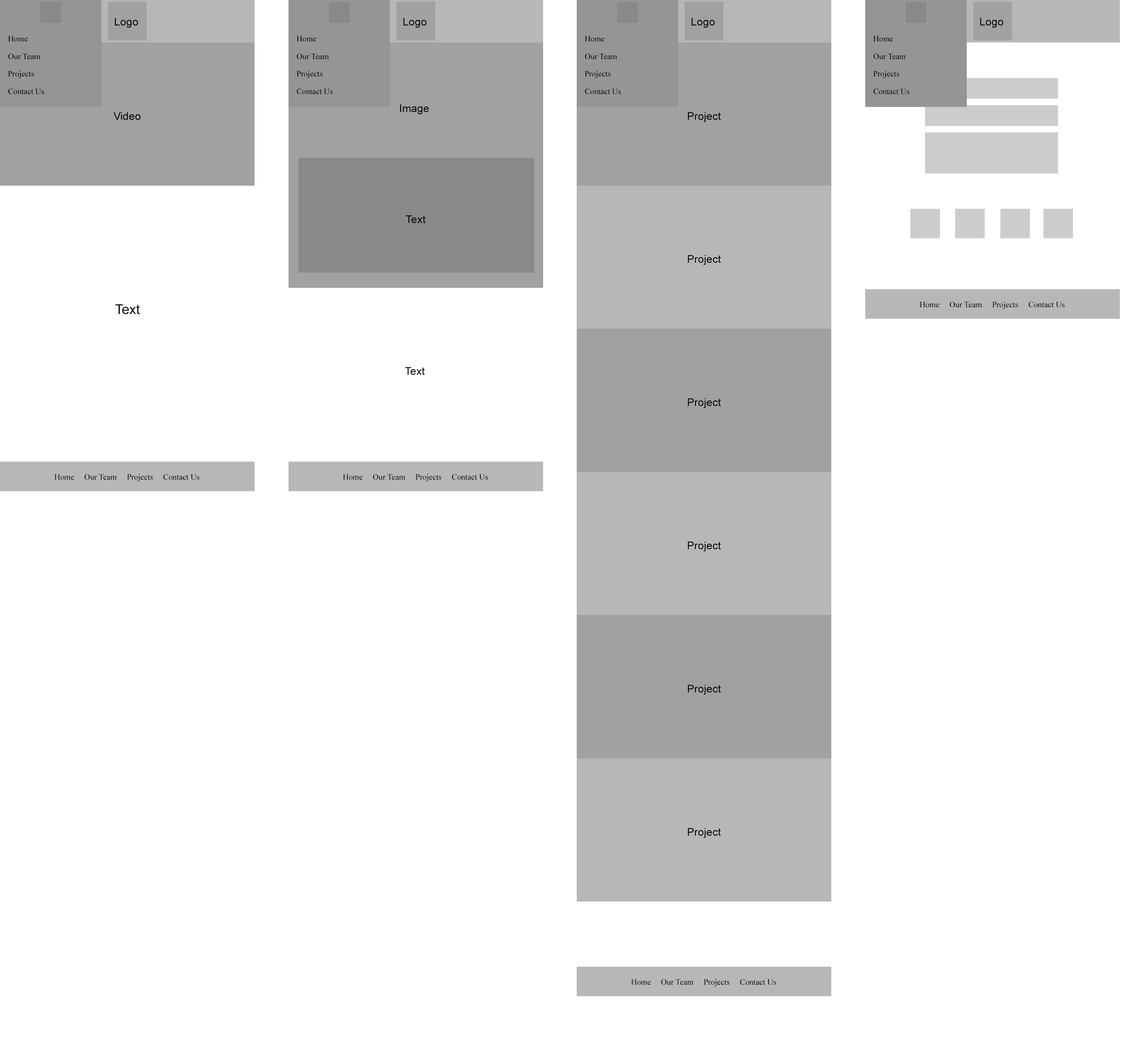
<style>
.page{position:relative;width:1129px;height:1057px;background:#ffffff}
.page>*{position:absolute;margin:0}
.t1{font:10.7px "ArialMT";color:#000000}
.t2{font:8.1px/17.5px "TimesNewRomanPSMT";color:#000000}
.t3{font:13.5px "ArialMT";color:#000000}
.t4{font:8.1px "TimesNewRomanPSMT";color:#000000}
</style>
<div class="page">
<p class="t1" style="left:115px;top:18px;width:23px;height:10px">Logo</p>
<p class="t1" style="left:403px;top:18px;width:24px;height:10px">Logo</p>
<p class="t1" style="left:691px;top:18px;width:24px;height:10px">Logo</p>
<p class="t1" style="left:980px;top:18px;width:23px;height:10px">Logo</p>
<p class="t2" style="left:8px;top:36px;width:36px;height:58px">Home<br>Our Team<br>Projects<br>Contact Us</p>
<p class="t2" style="left:296px;top:36px;width:37px;height:58px">Home<br>Our Team<br>Projects<br>Contact Us</p>
<p class="t2" style="left:584px;top:36px;width:37px;height:58px">Home<br>Our Team<br>Projects<br>Contact Us</p>
<p class="t2" style="left:873px;top:36px;width:36px;height:58px">Home<br>Our Team<br>Projects<br>Contact Us</p>
<p class="t1" style="left:113px;top:112px;width:27px;height:8px">Video</p>
<p class="t1" style="left:400px;top:104px;width:29px;height:10px">Image</p>
<p class="t1" style="left:687px;top:112px;width:34px;height:10px">Project</p>
<p class="t1" style="left:405px;top:215px;width:20px;height:8px">Text</p>
<p class="t1" style="left:687px;top:255px;width:34px;height:10px">Project</p>
<p class="t3" style="left:115px;top:304px;width:25px;height:10px">Text</p>
<p class="t4" style="left:919px;top:301px;width:145px;height:8px">Home     Our Team     Projects     Contact Us</p>
<p class="t1" style="left:405px;top:367px;width:19px;height:8px">Text</p>
<p class="t1" style="left:687px;top:398px;width:34px;height:10px">Project</p>
<p class="t4" style="left:54px;top:474px;width:145px;height:7px">Home     Our Team     Projects     Contact Us</p>
<p class="t4" style="left:343px;top:474px;width:145px;height:7px">Home     Our Team     Projects     Contact Us</p>
<p class="t1" style="left:687px;top:541px;width:34px;height:10px">Project</p>
<p class="t1" style="left:687px;top:684px;width:34px;height:11px">Project</p>
<p class="t1" style="left:687px;top:828px;width:34px;height:10px">Project</p>
<p class="t4" style="left:631px;top:979px;width:145px;height:7px">Home     Our Team     Projects     Contact Us</p>
</div>
